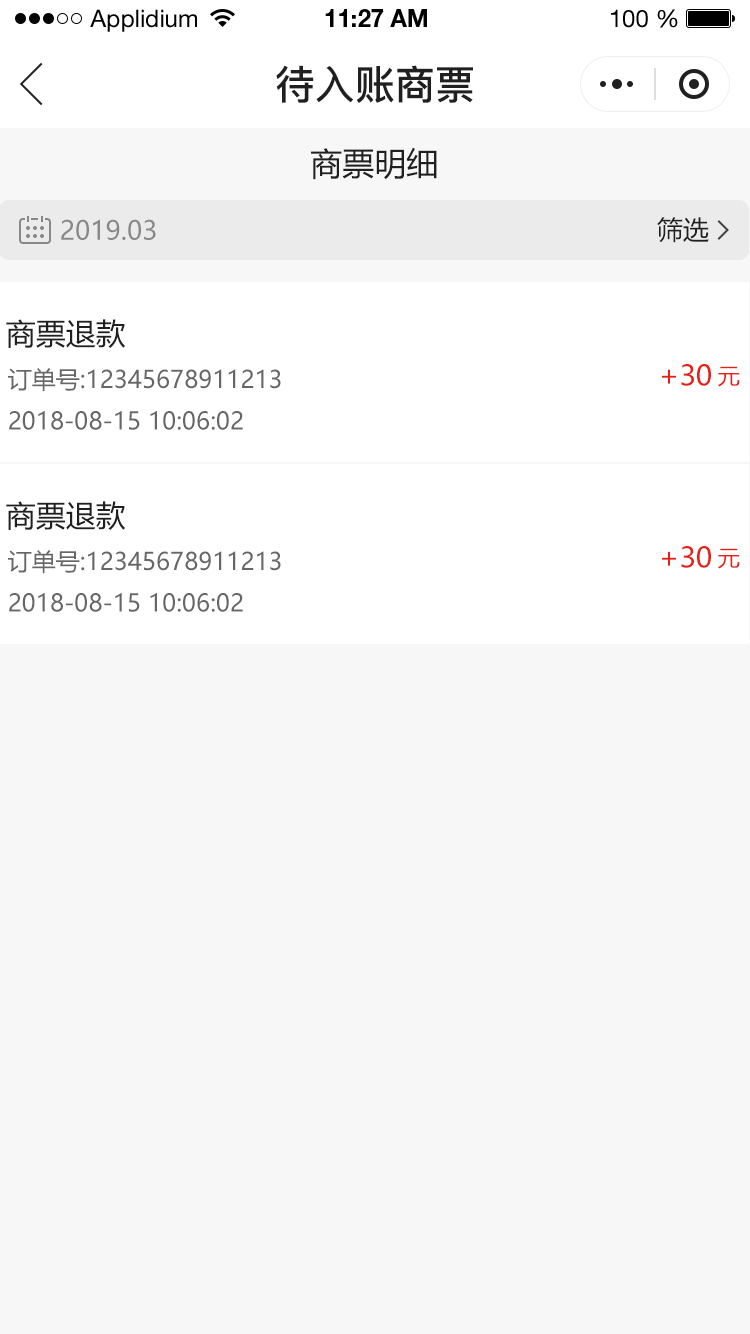
<style>
.page{position:relative;width:750px;height:1334px;background:#f7f7f7}
.page>*{position:absolute;margin:0}
.t1{font:24px "HelveticaNeueLTStd-Roman";color:#000000}
.t2{font:24px "HelveticaNeueLTStd-Bd";color:#000000}
.t3{font:40px "PingFang-SC-Bold";color:#202020;text-transform:uppercase}
.t4{font:32px "MicrosoftYaHei";color:#202020;text-transform:uppercase}
.t5{font:26px "MicrosoftYaHei";color:#888888;text-transform:uppercase}
.t6{font:26px "MicrosoftYaHei";color:#202020;text-transform:uppercase}
.t7{font:30px "MicrosoftYaHei";color:#202020;text-transform:uppercase}
.t8{font:28px "MicrosoftYaHei";color:#e61f18;text-transform:uppercase}
.t9{font:22px "MicrosoftYaHei";color:#e61f18;text-transform:uppercase}
.t10{font:24px "MicrosoftYaHei";color:#666666;text-transform:uppercase}
</style>
<div class="page">
<p class="t1" style="left:90px;top:9px;width:107px;height:23px">Applidium</p>
<p class="t2" style="left:325px;top:9px;width:102px;height:18px">11:27 AM</p>
<p class="t1" style="left:611px;top:9px;width:67px;height:19px">100 %</p>
<p class="t3" style="left:276px;top:65px;width:197px;height:38px">待入账商票</p>
<p class="t4" style="left:311px;top:147px;width:126px;height:33px">商票明细</p>
<p class="t5" style="left:61px;top:219px;width:95px;height:21px">2019.03</p>
<p class="t6" style="left:657px;top:217px;width:52px;height:26px">筛选</p>
<p class="t7" style="left:6px;top:319px;width:120px;height:29px">商票退款</p>
<p class="t8" style="left:662px;top:364px;width:49px;height:22px">+30</p>
<p class="t9" style="left:718px;top:366px;width:22px;height:21px">元</p>
<p class="t10" style="left:8px;top:368px;width:273px;height:24px">订单号:12345678911213</p>
<p class="t10" style="left:9px;top:411px;width:234px;height:19px">2018-08-15 10:06:02</p>
<p class="t7" style="left:6px;top:501px;width:120px;height:29px">商票退款</p>
<p class="t10" style="left:8px;top:550px;width:273px;height:24px">订单号:12345678911213</p>
<p class="t8" style="left:662px;top:546px;width:49px;height:22px">+30</p>
<p class="t9" style="left:718px;top:548px;width:22px;height:21px">元</p>
<p class="t10" style="left:9px;top:593px;width:234px;height:19px">2018-08-15 10:06:02</p>
</div>
